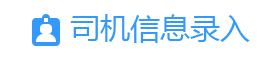
<style>
.page{position:relative;width:260px;height:60px;background:#ffffff}
.page>*{position:absolute;margin:0}
.t1{font:30px "MicrosoftYaHei";color:#3399ff}
</style>
<div class="page">
<p class="t1" style="left:70px;top:14px;width:180px;height:29px">司机信息录入</p>
</div>
